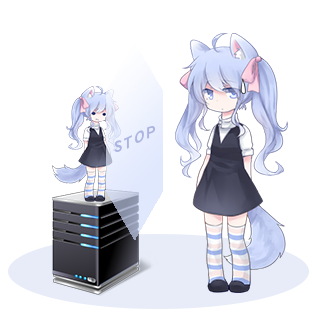
<style>
.page{position:relative;width:312px;height:312px;background:#ffffff}
.page>*{position:absolute;margin:0}
.t1{font:14.3px/20.9px "NotoSansCJKtc-Bold";letter-spacing:0.1em;color:#acb5e1}
</style>
<div class="page">
<p class="t1" style="left:114px;top:126px;width:41px;height:26px">STOP</p>
</div>
